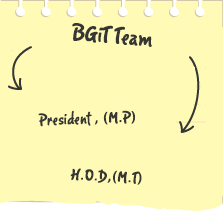
<style>
.page{position:relative;width:223px;height:211px;background:#fffab5}
.page>*{position:absolute;margin:0}
.t1{font:28.1px "Romy";color:#363635;font-weight:bold;scale:0.89 1}
.t2{font:20.1px "Romy";color:#363635;font-weight:bold;scale:0.89 1}
</style>
<div class="page">
<p class="t1" style="left:72px;top:23px;width:80px;height:24px;rotate:4deg">BGiT Team</p>
<p class="t2" style="left:38px;top:110px;width:97px;height:17px;rotate:-2deg">President , (M.P)</p>
<p class="t2" style="left:70px;top:168px;width:72px;height:17px;rotate:3deg">H.O.D,(M.T)</p>
</div>
